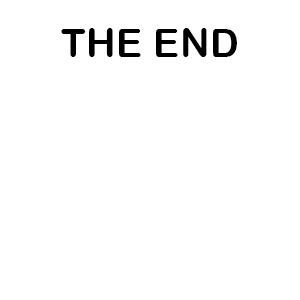
<style>
.page{position:relative;width:300px;height:300px;background:#ffffff}
.page>*{position:absolute;margin:0}
.t1{font:40.3px "ArialRoundedMTBold";letter-spacing:0.02em;color:#000000;scale:0.96 1}
</style>
<div class="page">
<p class="t1" style="left:61px;top:28px;width:176px;height:29px">THE END</p>
</div>
